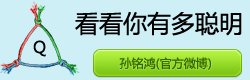
<style>
.page{position:relative;width:250px;height:80px;background:#ceeff6}
.page>*{position:absolute;margin:0}
.t1{font:24px "MicrosoftYaHei";color:#000000}
.t2{font:16px "MicrosoftYaHei";color:#000000}
.t3{font:12px "MicrosoftYaHei";color:#336600;text-transform:uppercase}
</style>
<div class="page">
<p class="t1" style="left:75px;top:11px;width:167px;height:25px">看看你有多聪明</p>
<p class="t2" style="left:33px;top:40px;width:13px;height:17px">Q</p>
<p class="t3" style="left:119px;top:57px;width:92px;height:13px">孙铭鸿(官方微博)</p>
</div>
